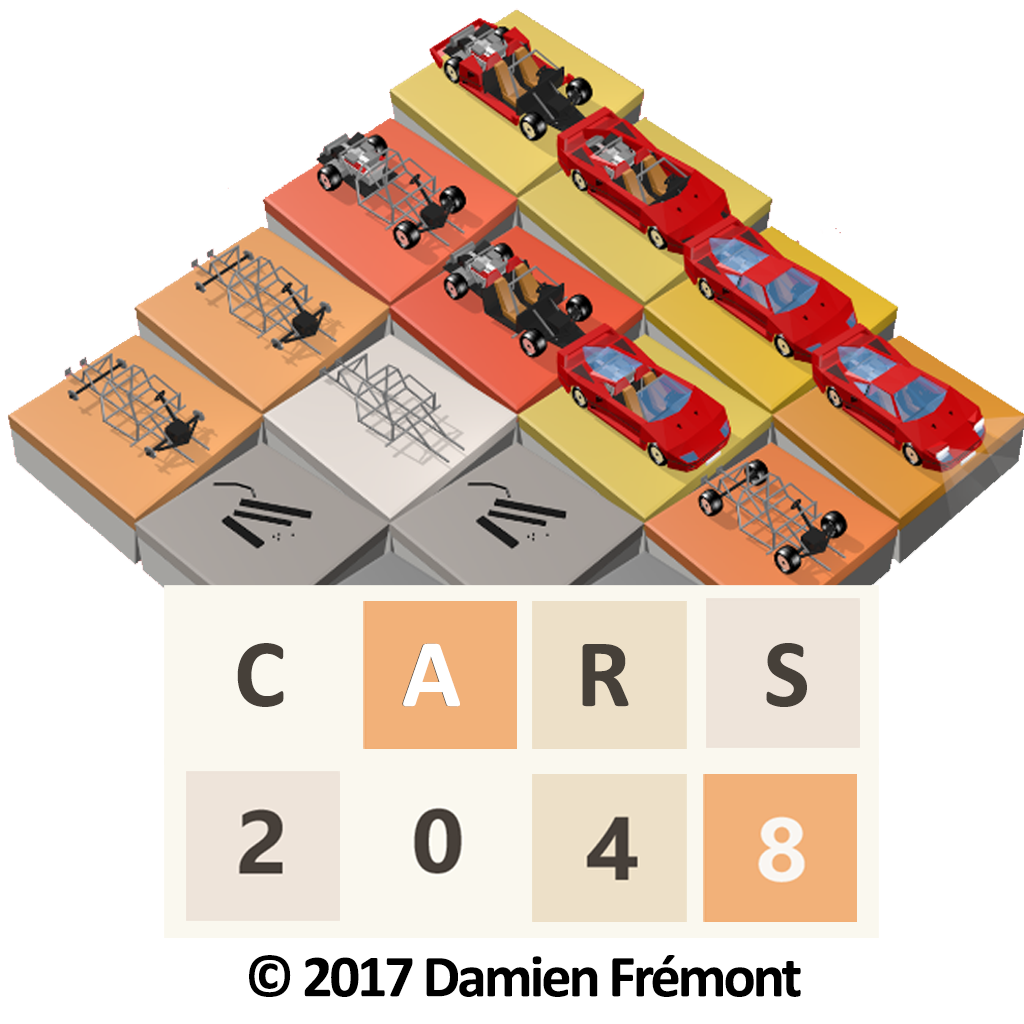
<style>
.page{position:relative;width:1024px;height:1024px;background:#ffffff}
.page>*{position:absolute;margin:0}
.t1{font:97.7px "Calibri-Bold";letter-spacing:-0.05em;color:#464039}
.t2{font:97.7px "Calibri-Bold";letter-spacing:-0.05em;color:#ffffff}
.t3{font:60px "Calibri-Bold";letter-spacing:-0.05em;color:#000000}
</style>
<div class="page">
<p class="t1" style="left:237px;top:643px;width:570px;height:64px">C       A       R        S</p>
<p class="t2" style="left:403px;top:643px;width:57px;height:64px">A</p>
<p class="t3" style="left:249px;top:955px;width:552px;height:42px">© 2017 Damien Frémont</p>
</div>
